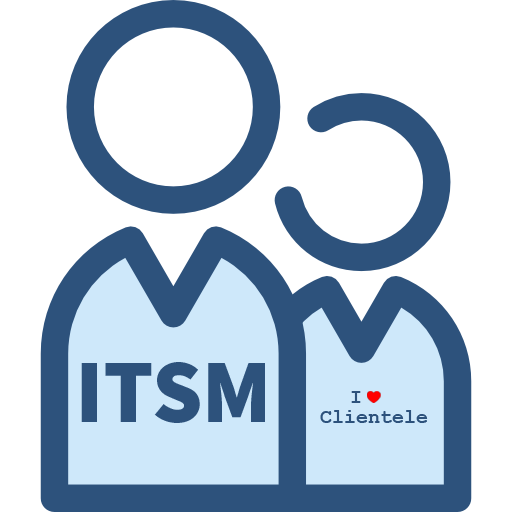
<style>
.page{position:relative;width:512px;height:512px;background:#ffffff}
.page>*{position:absolute;margin:0}
.t1{font:89.2px "SourceSansPro-Black";color:#2d527c}
.t2{font:20px "CourierNewPS-BoldMT";color:#2d527c}
</style>
<div class="page">
<p class="t1" style="left:81px;top:362px;width:184px;height:61px">ITSM</p>
<p class="t2" style="left:320px;top:391px;width:108px;height:32px;text-align:center">I   <br>Clientele</p>
</div>
